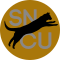
<style>
.page{position:relative;width:60px;height:60px;background:#a9770a}
.page>*{position:absolute;margin:0}
.t1{font:24.2px "Code-Pro-Demo";color:#8a8987}
.t2{font:24px "Code-Pro-Demo";color:#8a8987}
</style>
<div class="page">
<p class="t1" style="left:9px;top:9px;width:28px;height:17px">SN</p>
<p class="t2" style="left:20px;top:32px;width:32px;height:17px">Cu</p>
</div>
